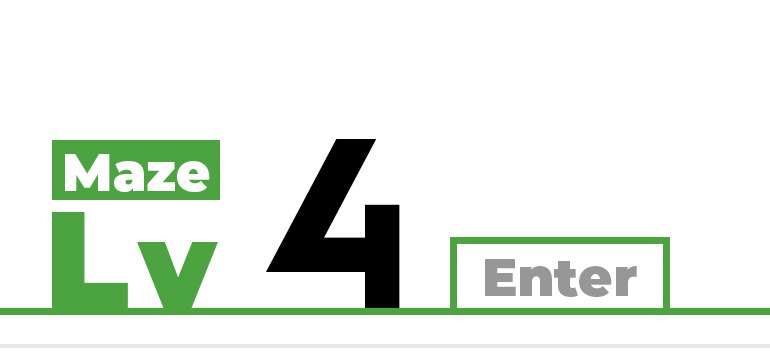
<style>
.page{position:relative;width:770px;height:356px;background:#ffffff}
.page>*{position:absolute;margin:0}
.t1{font:326.2px "Momcake-Bold";letter-spacing:0.1em;color:#000000}
.t2{font:52.6px "Montserrat-Black";color:#ffffff}
.t3{font:137.4px "Montserrat-Black";letter-spacing:0.075em;color:#4ba43f}
.t4{font:120px "Montserrat-Black";letter-spacing:0.075em;color:#4ba43f}
.t5{font:52.6px "Montserrat-Black";color:#979797}
</style>
<div class="page">
<p class="t1" style="left:265px;top:139px;width:135px;height:169px">4</p>
<p class="t2" style="left:65px;top:154px;width:145px;height:38px">Maze</p>
<p class="t3" style="left:52px;top:212px;width:166px;height:97px">L<span class="t4">v</span></p>
<p class="t5" style="left:485px;top:259px;width:152px;height:38px">Enter</p>
</div>
